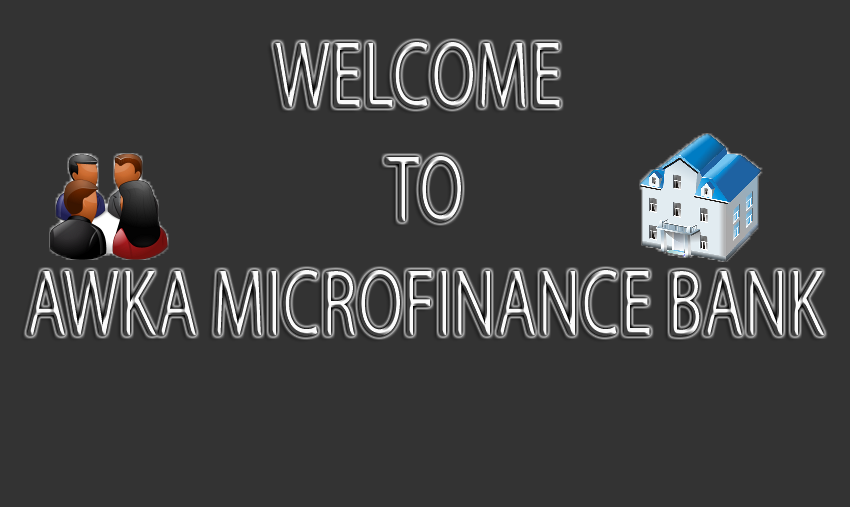
<style>
.page{position:relative;width:850px;height:507px;background:#333333}
.page>*{position:absolute;margin:0}
.t1{font:94.9px "MyriadPro-Regular";scale:0.71 1}
</style>
<div class="page">
<p class="t1" style="left:27px;top:42px;width:797px;height:294px;text-align:center">WELCOME <br>TO<br>AWKA MICROFINANCE BANK</p>
</div>
